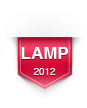
<style>
.page{position:relative;width:87px;height:108px;background:#ffffff}
.page>*{position:absolute;margin:0}
.t1{font:17px "Helvetica-Bold";color:#fefefe}
.t2{font:9.7px "Helvetica";color:#fefefe}
</style>
<div class="page">
<p class="t1" style="left:21px;top:47px;width:47px;height:28px;text-align:center">LAMP<br><br><span class="t2">2012</span></p>
</div>
